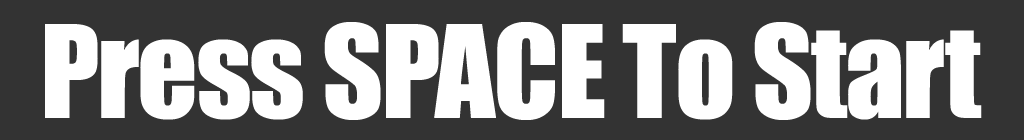
<style>
.page{position:relative;width:1024px;height:140px;background:#333333}
.page>*{position:absolute;margin:0}
.t1{font:119px "Impact";letter-spacing:-0.02em;color:#ffffff}
</style>
<div class="page">
<p class="t1" style="left:45px;top:22px;width:937px;height:98px">Press SPACE To Start</p>
</div>
